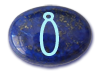
<style>
.page{position:relative;width:100px;height:71px;background:#ffffff}
.page>*{position:absolute;margin:0}
.t1{font:60px "EccentricStd";color:#aff0f6}
</style>
<div class="page">
<p class="t1" style="left:39px;top:12px;width:20px;height:44px">8</p>
</div>
